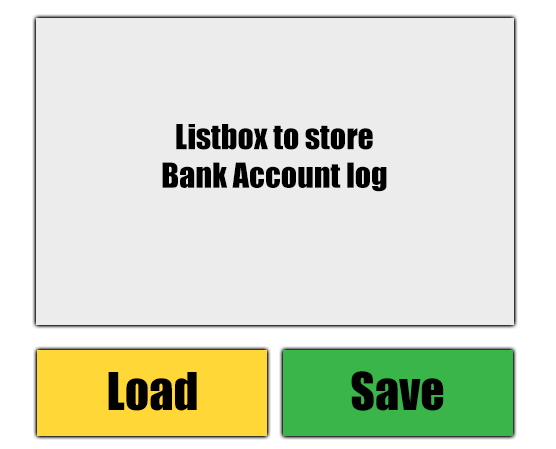
<style>
.page{position:relative;width:556px;height:449px;background:#ececec}
.page>*{position:absolute;margin:0}
.t1{font:32px "Impact";color:#000000}
.t2{font:48px "Impact";color:#000000}
</style>
<div class="page">
<p class="t1" style="left:162px;top:124px;width:225px;height:68px;text-align:center">Listbox to store<br>Bank Account log</p>
<p class="t2" style="left:108px;top:372px;width:89px;height:39px">Load</p>
<p class="t2" style="left:351px;top:371px;width:93px;height:40px">Save</p>
</div>
